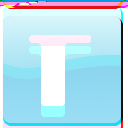
<style>
.page{position:relative;width:128px;height:128px}
.page>*{position:absolute;margin:0}
.t1{font:99.4px "BlackWolf";color:#ffffff}
</style>
<div class="page">
<p class="t1" style="left:29px;top:33px;width:62px;height:71px">T</p>
</div>
